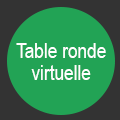
<style>
.page{position:relative;width:120px;height:120px;background:#22a355}
.page>*{position:absolute;margin:0}
.t1{font:21px/7px "ArialNarrow";color:#ffffff}
</style>
<div class="page">
<p class="t1" style="left:16px;top:43px;width:90px;height:37px;text-align:center">Table ronde<br>virtuelle</p>
</div>
